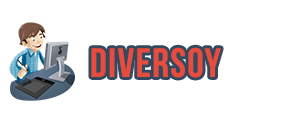
<style>
.page{position:relative;width:300px;height:120px;background:#ffffff}
.page>*{position:absolute;margin:0}
.t1{font:40.9px "BebasNeue";letter-spacing:0.038em;color:#e74c3c}
</style>
<div class="page">
<p class="t1" style="left:91px;top:47px;width:130px;height:31px">Diversoy</p>
</div>
